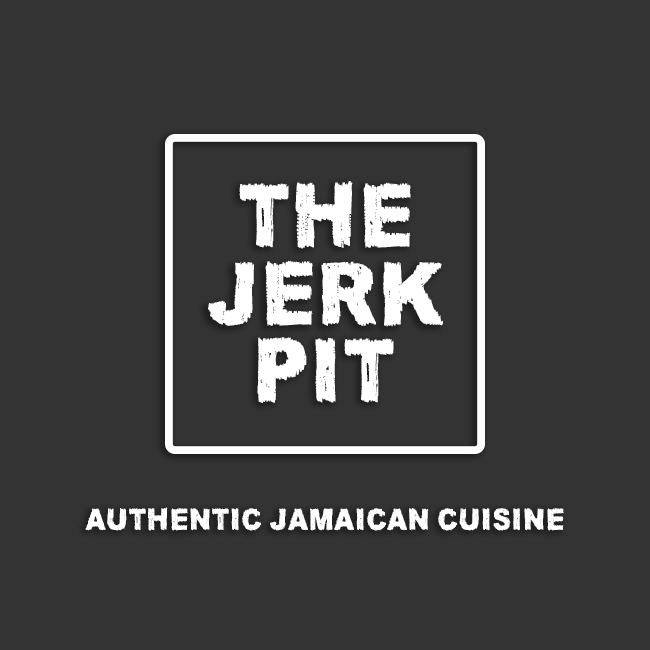
<style>
.page{position:relative;width:650px;height:650px;background:#333333}
.page>*{position:absolute;margin:0}
.t1{font:87.9px "JamaicaAroma";color:#ffffff}
.t2{font:30px "JamaicaAroma";color:#ffffff}
</style>
<div class="page">
<p class="t1" style="left:239px;top:181px;width:172px;height:68px">THE</p>
<p class="t1" style="left:208px;top:260px;width:235px;height:67px">JERK</p>
<p class="t1" style="left:257px;top:337px;width:137px;height:66px">PIT</p>
<p class="t2" style="left:85px;top:507px;width:479px;height:24px">AUTHENTIC JAMAICAN CUISINE</p>
</div>
